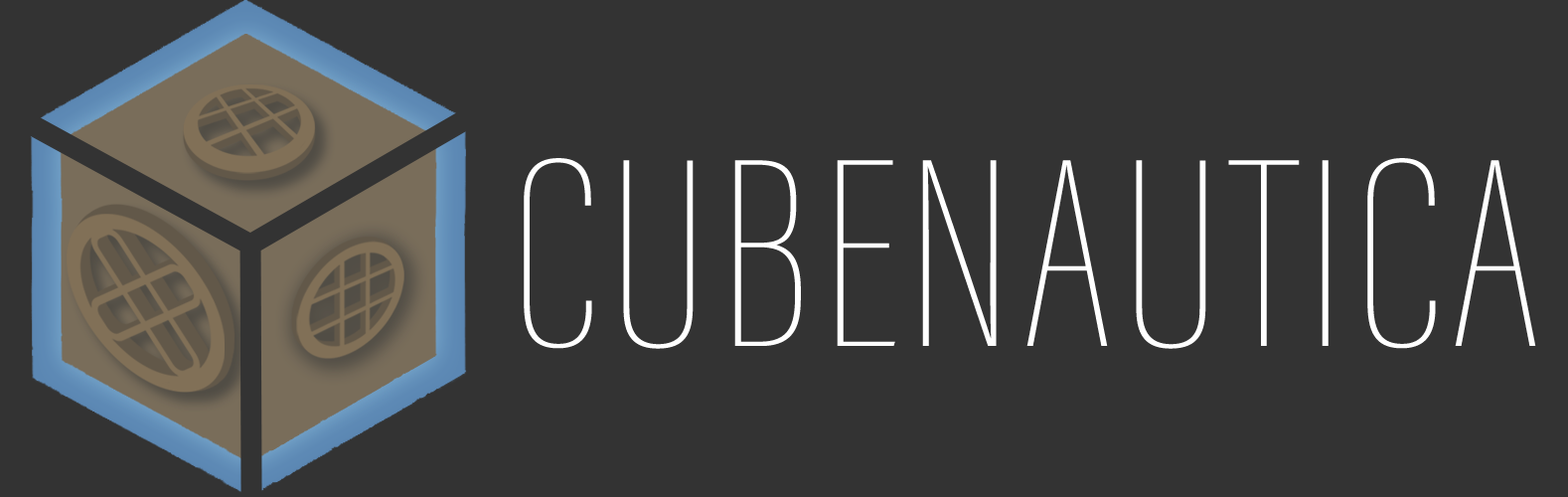
<style>
.page{position:relative;width:1568px;height:497px;background:#333333}
.page>*{position:absolute;margin:0}
.t1{font:278.3px "AcuminConcept-ExtraCondensedThin";letter-spacing:0.02em;color:#ffffff;scale:1.17 1}
</style>
<div class="page">
<p class="t1" style="left:524px;top:158px;width:1012px;height:191px">CUBENAUTICA</p>
</div>
